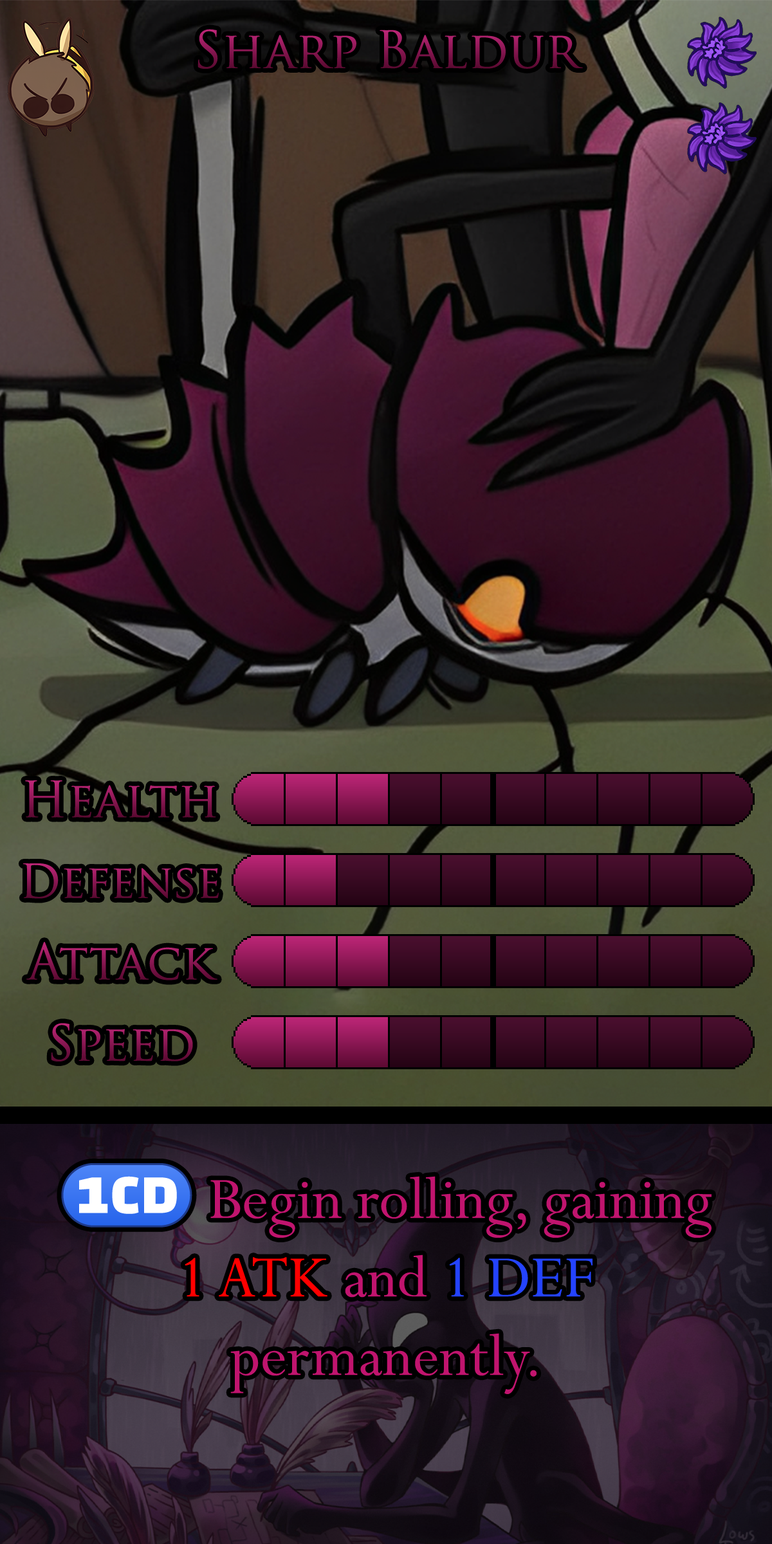
<style>
.page{position:relative;width:772px;height:1544px}
.page>*{position:absolute;margin:0}
.t1{font:86.2px "TrajanPro-Regular"}
.t2{font:83.6px "TrajanPro-Regular"}
.t3{font:78.5px "TrajanPro-Regular"}
.t4{font:112.6px/78.5px "Perpetua"}
.t5{font:112.6px/78.5px "stoogedings-Regular"}
</style>
<div class="page">
<p class="t1" style="left:198px;top:29px;width:385px;height:40px">Sharp Baldur</p>
<p class="t2" style="left:25px;top:781px;width:191px;height:37px">Health</p>
<p class="t3" style="left:23px;top:864px;width:196px;height:35px">Defense</p>
<p class="t2" style="left:26px;top:942px;width:191px;height:39px">Attack</p>
<p class="t2" style="left:51px;top:1023px;width:142px;height:39px">Speed</p>
<p class="t4" style="left:61px;top:1163px;width:651px;height:231px;text-align:center"><span class="t5">(1CD)</span> Begin rolling, gaining 1 ATK and 1 DEF permanently.</p>
</div>
